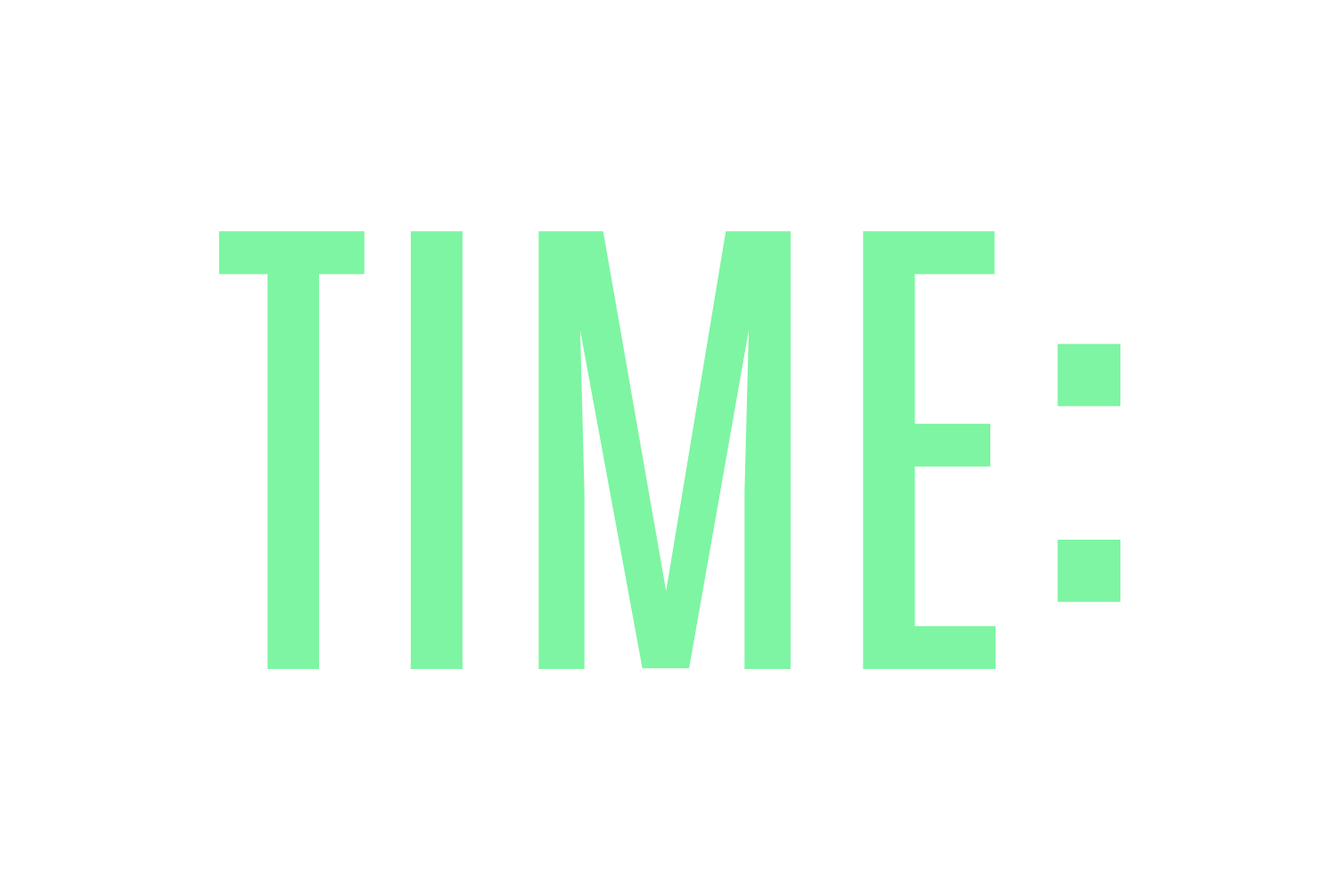
<style>
.page{position:relative;width:1337px;height:892px;background:#ffffff}
.page>*{position:absolute;margin:0}
.t1{font:509.5px "Antonio-Regular";color:#7ef5a2}
</style>
<div class="page">
<p class="t1" style="left:218px;top:231px;width:903px;height:438px">TIME:</p>
</div>
